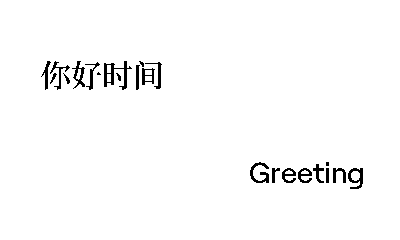
<style>
.page{position:relative;width:400px;height:240px;background:#ffffff}
.page>*{position:absolute;margin:0}
.t1{font:31px "SourceHanSerifCNVF-SemiBold";color:#000000}
.t2{font:29px "Roobert-Medium";color:#000000}
</style>
<div class="page">
<p class="t1" style="left:41px;top:61px;width:121px;height:29px">你好时间</p>
<p class="t2" style="left:250px;top:162px;width:113px;height:27px">Greeting</p>
</div>
